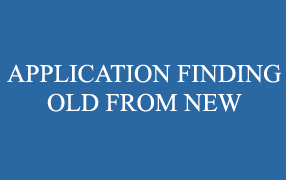
<style>
.page{position:relative;width:286px;height:180px;background:#2968a2}
.page>*{position:absolute;margin:0}
.t1{font:25.4px "TimesNewRomanPSMT";color:#ffffff}
</style>
<div class="page">
<p class="t1" style="left:7px;top:64px;width:275px;height:19px">APPLICATION FINDING</p>
<p class="t1" style="left:47px;top:93px;width:195px;height:19px">OLD FROM NEW</p>
</div>
